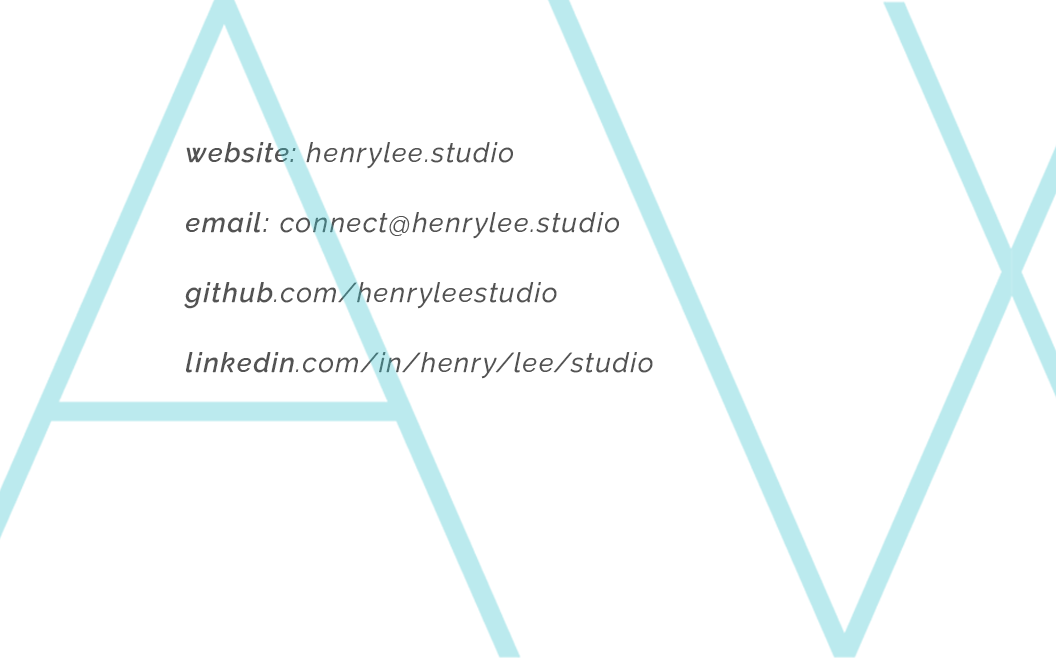
<style>
.page{position:relative;width:1056px;height:659px;background:#ffffff}
.page>*{position:absolute;margin:0}
.t1{font:27px/70px "RalewayItalic-Italic";letter-spacing:0.08em;color:#535353}
.t2{font:27px/70px "RalewayItalic-MediumItalic";letter-spacing:0.08em;color:#535353}
</style>
<div class="page">
<p class="t1" style="left:184px;top:142px;width:469px;height:237px"><span class="t2">website:</span> henrylee.studio<br><span class="t2">email: </span>connect@henrylee.studio<br><span class="t2">github</span>.com/henryleestudio<br><span class="t2">linkedin</span>.com/in/henry/lee/studio</p>
</div>
